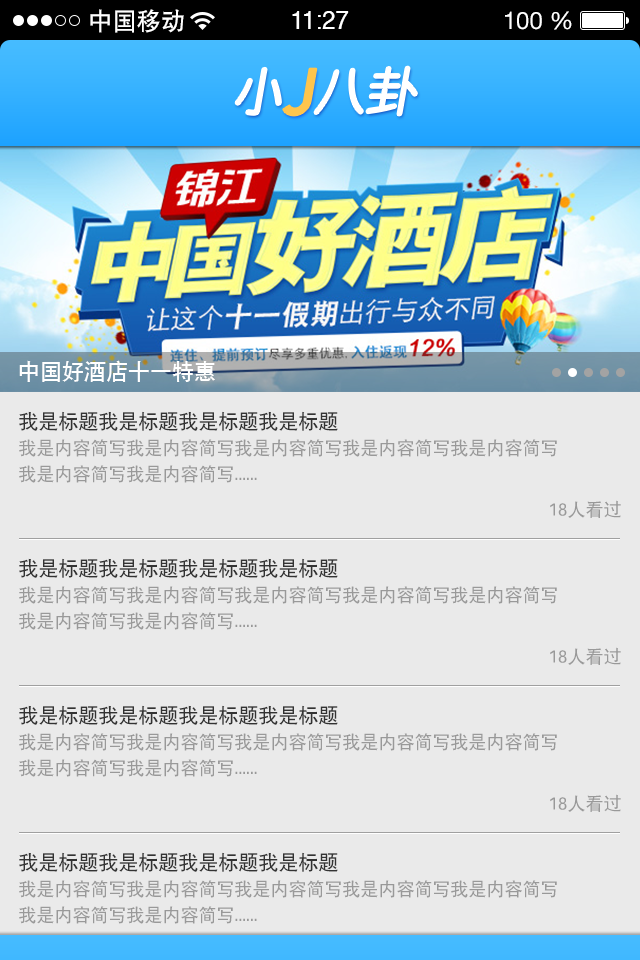
<style>
.page{position:relative;width:640px;height:960px;background:#eaeaea}
.page>*{position:absolute;margin:0}
.t1{font:24px "SIL-Hei-Med-Jian";color:#ffffff}
.t2{font:24px "Helvetica";color:#ffffff}
.t3{font:24px "HelveticaNeueLTStd-Roman";color:#ffffff}
.t4{font:22px "SIL-Hei-Med-Jian";color:#ffffff}
.t5{font:18px/26px "SIL-Hei-Med-Jian";color:#999999}
.t6{font:20px/26px "SIL-Hei-Med-Jian";color:#333333}
.t7{font:18px "SIL-Hei-Med-Jian";color:#999999}
</style>
<div class="page">
<p class="t1" style="left:90px;top:9px;width:94px;height:24px">中国移动</p>
<p class="t2" style="left:292px;top:11px;width:57px;height:18px">11:27</p>
<p class="t3" style="left:505px;top:11px;width:67px;height:19px">100 %</p>
<p class="t4" style="left:19px;top:360px;width:196px;height:22px">中国好酒店十一特惠</p>
<p class="t5" style="left:19px;top:411px;width:538px;height:72px"><span class="t6">我是标题我是标题我是标题我是标题<br></span>我是内容简写我是内容简写我是内容简写我是内容简写我是内容简写<br>我是内容简写我是内容简写......</p>
<p class="t7" style="left:550px;top:500px;width:71px;height:18px">18人看过</p>
<p class="t5" style="left:19px;top:558px;width:538px;height:72px"><span class="t6">我是标题我是标题我是标题我是标题<br></span>我是内容简写我是内容简写我是内容简写我是内容简写我是内容简写<br>我是内容简写我是内容简写......</p>
<p class="t7" style="left:550px;top:647px;width:71px;height:18px">18人看过</p>
<p class="t5" style="left:19px;top:705px;width:538px;height:72px"><span class="t6">我是标题我是标题我是标题我是标题<br></span>我是内容简写我是内容简写我是内容简写我是内容简写我是内容简写<br>我是内容简写我是内容简写......</p>
<p class="t7" style="left:550px;top:794px;width:71px;height:18px">18人看过</p>
<p class="t5" style="left:19px;top:852px;width:538px;height:72px"><span class="t6">我是标题我是标题我是标题我是标题<br></span>我是内容简写我是内容简写我是内容简写我是内容简写我是内容简写<br>我是内容简写我是内容简写......</p>
</div>
